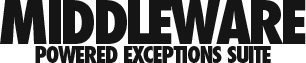
<style>
.page{position:relative;width:306px;height:63px;background:#151515}
.page>*{position:absolute;margin:0}
.t1{font:95px "FuturaPTCond-ExtraBold";letter-spacing:-0.05em;color:#151515;font-variant:small-caps}
.t2{font:35px "FuturaPTCond-ExtraBold";letter-spacing:-0.05em;color:#151515;font-variant:small-caps}
</style>
<div class="page">
<p class="t1" style="left:0px;top:0px;width:306px;height:44px">middleware</p>
<p class="t2" style="left:35px;top:46px;width:236px;height:17px">powered exceptions suite</p>
</div>
